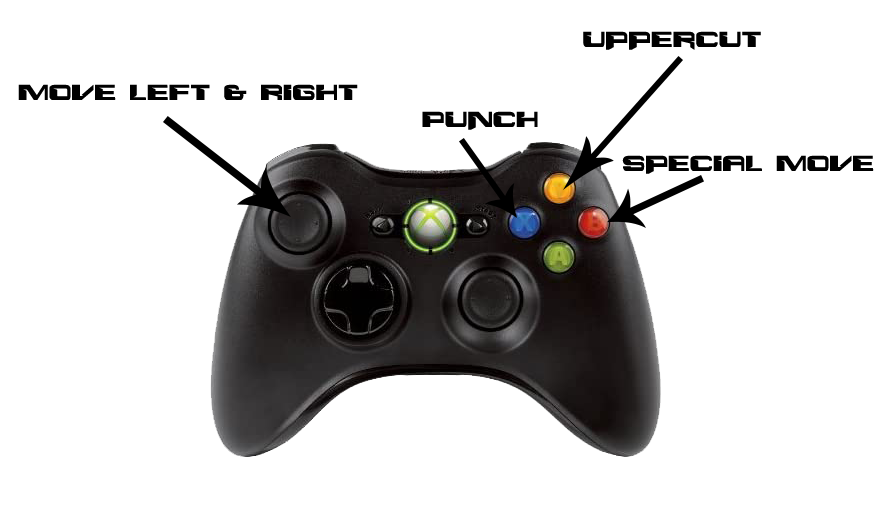
<style>
.page{position:relative;width:874px;height:530px;background:#ffffff}
.page>*{position:absolute;margin:0}
.t1{font:24px "Interdiction";color:#000000}
</style>
<div class="page">
<p class="t1" style="left:583px;top:31px;width:178px;height:19px">Uppercut</p>
<p class="t1" style="left:18px;top:84px;width:340px;height:16px">Move Left &amp; Right</p>
<p class="t1" style="left:422px;top:111px;width:116px;height:19px">Punch</p>
<p class="t1" style="left:622px;top:155px;width:252px;height:19px">Special Move</p>
</div>
